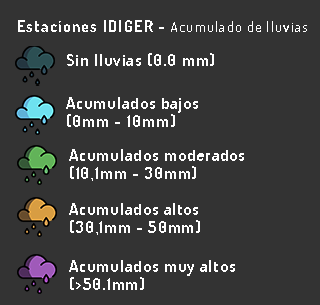
<style>
.page{position:relative;width:320px;height:305px;background:#333333}
.page>*{position:absolute;margin:0}
.t1{font:14px "Dosis-SemiBold";letter-spacing:0.075em;color:#ffffff}
.t2{font:16px "Dosis-Bold";letter-spacing:0.075em;color:#ffffff}
.t3{font:16px "Dosis-SemiBold";letter-spacing:0.075em;color:#ffffff}
.t4{font:16px/18px "Dosis-SemiBold";letter-spacing:0.075em;color:#ffffff}
</style>
<div class="page">
<p class="t1" style="left:18px;top:20px;width:289px;height:12px"><span class="t2">Estaciones IDIGER - </span>Acumulado de lluvias</p>
<p class="t3" style="left:67px;top:53px;width:147px;height:13px">Sin lluvias (0.0 mm)</p>
<p class="t4" style="left:66px;top:97px;width:132px;height:30px">Acumulados bajos <br>(0mm - 10mm)</p>
<p class="t4" style="left:69px;top:149px;width:175px;height:32px">Acumulados moderados<br>(10,1mm - 30mm)</p>
<p class="t4" style="left:69px;top:203px;width:131px;height:32px">Acumulados altos<br>(30,1mm - 50mm)</p>
<p class="t4" style="left:69px;top:260px;width:166px;height:30px">Acumulados muy altos<br>(&gt;50.1mm)</p>
</div>
